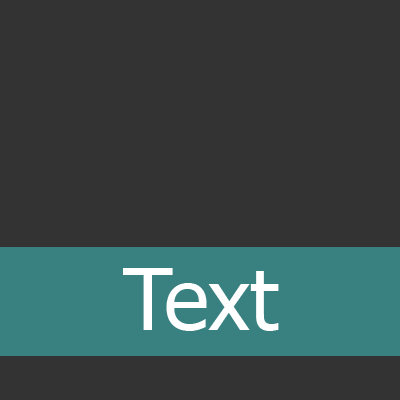
<style>
.page{position:relative;width:400px;height:400px;background:#333333}
.page>*{position:absolute;margin:0}
.t1{font:85px "Tahoma";color:#ffffff}
</style>
<div class="page">
<p class="t1" style="left:123px;top:268px;width:156px;height:63px">Text</p>
</div>
